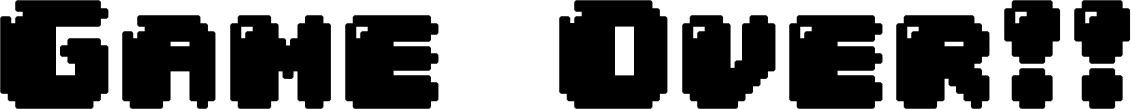
<style>
.page{position:relative;width:1131px;height:109px;background:#000000}
.page>*{position:absolute;margin:0}
.t1{font:127px "04b30";letter-spacing:-0.005em;color:#000000;font-weight:bold}
</style>
<div class="page">
<p class="t1" style="left:0px;top:0px;width:1131px;height:109px">Game Over!!</p>
</div>
